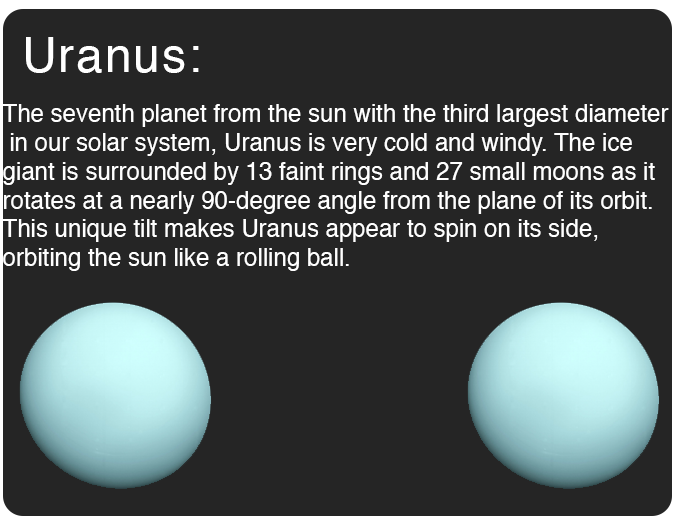
<style>
.page{position:relative;width:675px;height:525px;background:#252525}
.page>*{position:absolute;margin:0}
.t1{font:48px "Helvetica";letter-spacing:0.04em;color:#ffffff}
.t2{font:24px "Helvetica";color:#ffffff}
</style>
<div class="page">
<p class="t1" style="left:26px;top:37px;width:173px;height:36px">Uranus:</p>
<p class="t2" style="left:2px;top:104px;width:667px;height:167px">The seventh planet from the sun with the third largest diameter<br> in our solar system, Uranus is very cold and windy. The ice <br>giant is surrounded by 13 faint rings and 27 small moons as it <br>rotates at a nearly 90-degree angle from the plane of its orbit. <br>This unique tilt makes Uranus appear to spin on its side, <br>orbiting the sun like a rolling ball.</p>
</div>
